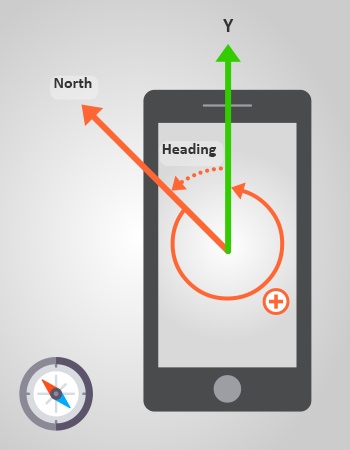
<style>
.page{position:relative;width:350px;height:450px}
.page>*{position:absolute;margin:0}
.t1{font:20px "Calibri-Bold";color:#333333}
.t2{font:16px "Calibri-Bold";color:#333333}
</style>
<div class="page">
<p class="t1" style="left:223px;top:19px;width:11px;height:13px">Y</p>
<p class="t2" style="left:54px;top:77px;width:38px;height:11px">North</p>
<p class="t2" style="left:162px;top:143px;width:55px;height:14px">Heading</p>
</div>
